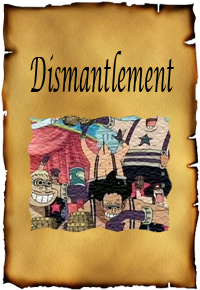
<style>
.page{position:relative;width:200px;height:290px}
.page>*{position:absolute;margin:0}
.t1{font:48px "LucidaCalligraphy-Italic";color:#000000;scale:0.36 1}
</style>
<div class="page">
<p class="t1" style="left:30px;top:51px;width:144px;height:41px">Dismantlement</p>
</div>
